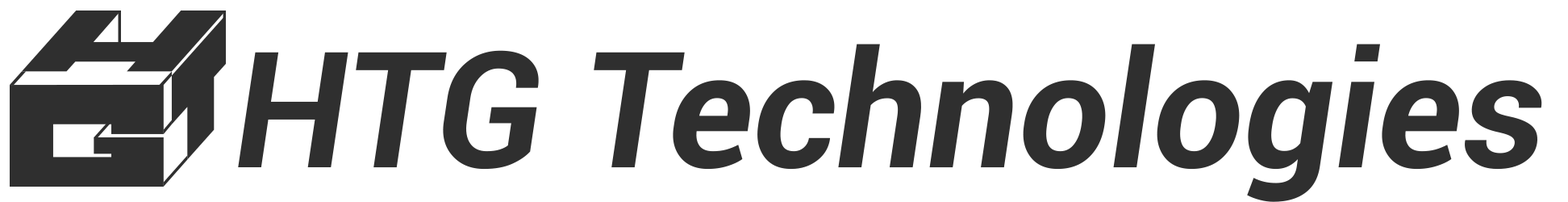
<style>
.page{position:relative;width:1568px;height:202px;background:#ffffff}
.page>*{position:absolute;margin:0}
.t1{font:161.3px "Roboto-BoldItalic";color:#2f2f2f}
</style>
<div class="page">
<p class="t1" style="left:238px;top:44px;width:1304px;height:158px">HTG Technologies</p>
</div>
